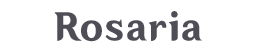
<style>
.page{position:relative;width:256px;height:56px;background:#ffffff}
.page>*{position:absolute;margin:0}
.t1{font:36px "HYWenHei-HEW";color:#4f4e57}
</style>
<div class="page">
<p class="t1" style="left:54px;top:11px;width:148px;height:31px">Rosaria</p>
</div>
